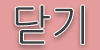
<style>
.page{position:relative;width:100px;height:50px;background:#e49c9c}
.page>*{position:absolute;margin:0}
.t1{font:41.7px "NanumGothic";color:#3c3c3c}
</style>
<div class="page">
<p class="t1" style="left:15px;top:5px;width:69px;height:39px">닫기</p>
</div>
